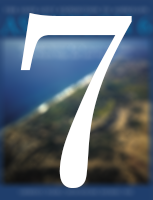
<style>
.page{position:relative;width:153px;height:200px}
.page>*{position:absolute;margin:0}
.t1{font:250px "Century";color:#ffffff}
</style>
<div class="page">
<p class="t1" style="left:20px;top:13px;width:112px;height:175px">7</p>
</div>
